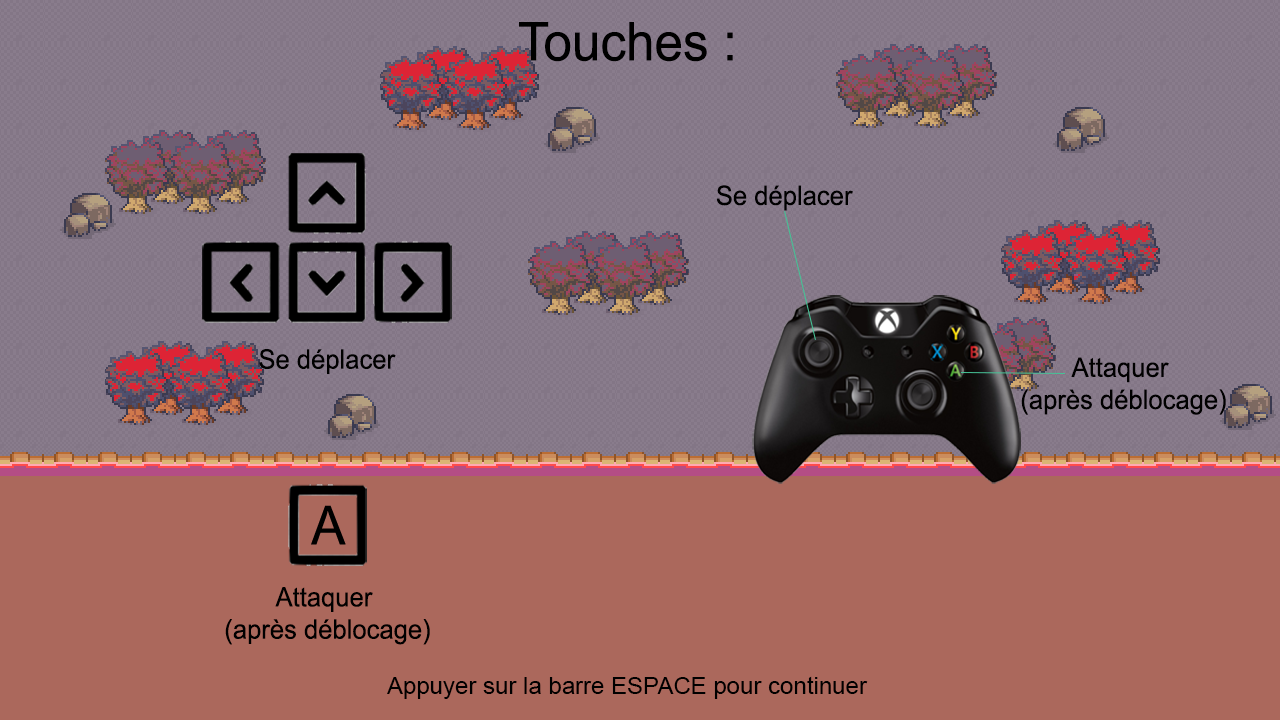
<style>
.page{position:relative;width:1280px;height:720px;background:#ab685c}
.page>*{position:absolute;margin:0}
.t1{font:53.7px "ArialMT";color:#000000;scale:0.95 1}
.t2{font:26.8px "ArialMT";color:#000000;scale:0.95 1}
.t3{font:24px "ArialMT";color:#000000}
</style>
<div class="page">
<p class="t1" style="left:519px;top:22px;width:214px;height:40px">Touches :</p>
<p class="t2" style="left:716px;top:185px;width:137px;height:26px">Se déplacer</p>
<p class="t2" style="left:259px;top:349px;width:137px;height:25px">Se déplacer</p>
<p class="t2" style="left:1021px;top:357px;width:205px;height:58px;text-align:center">Attaquer <br>(après déblocage)</p>
<p class="t2" style="left:225px;top:587px;width:205px;height:58px;text-align:center">Attaquer <br>(après déblocage)</p>
<p class="t3" style="left:387px;top:676px;width:481px;height:23px">Appuyer sur la barre ESPACE pour continuer</p>
</div>
